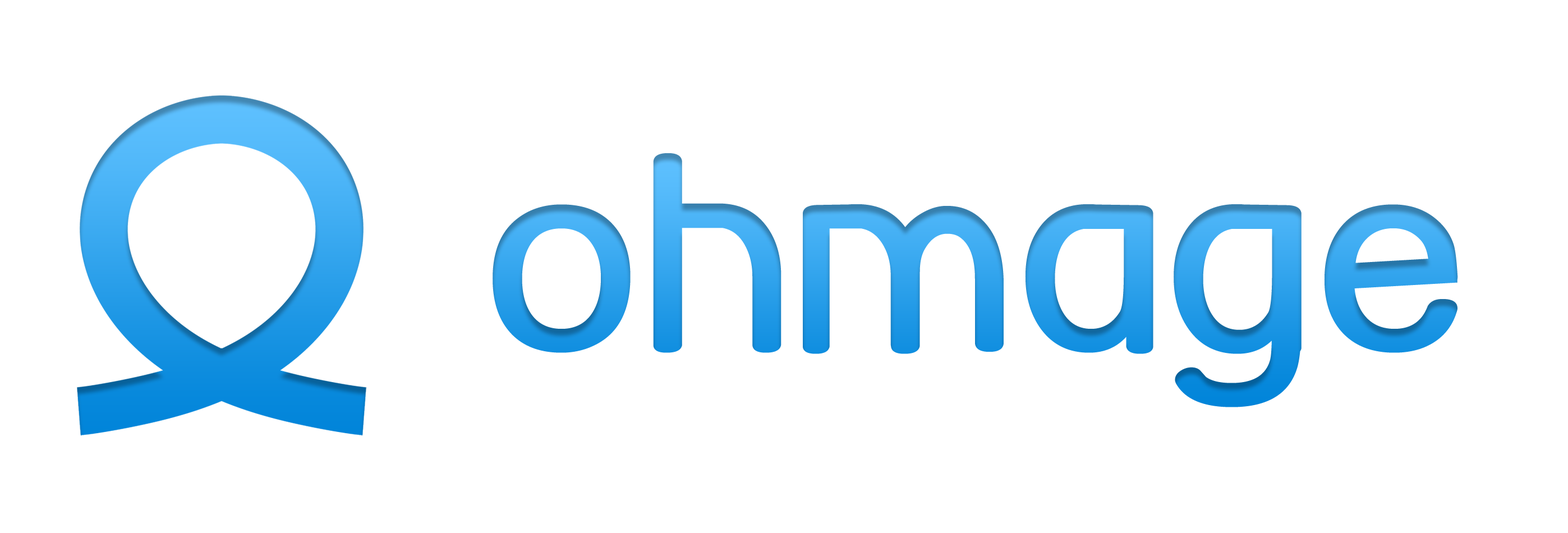
<style>
.page{position:relative;width:1568px;height:533px;background:#ffffff}
.page>*{position:absolute;margin:0}
.t1{font:273.5px "StreetCornerBold"}
</style>
<div class="page">
<p class="t1" style="left:493px;top:153px;width:965px;height:254px">ohmage</p>
</div>
